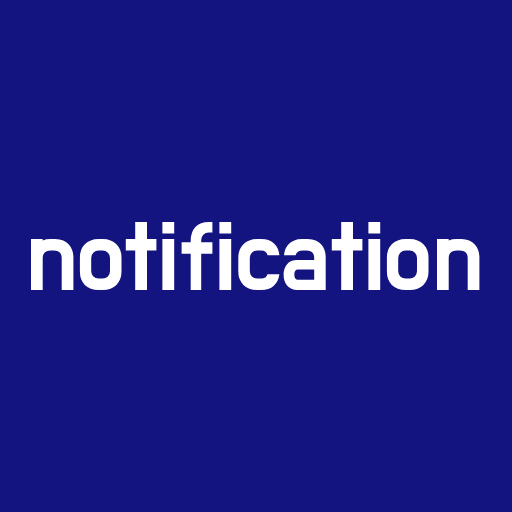
<style>
.page{position:relative;width:512px;height:512px;background:#131480}
.page>*{position:absolute;margin:0}
.t1{font:100px "DoHyeon-Regular";color:#ffffff}
</style>
<div class="page">
<p class="t1" style="left:31px;top:221px;width:449px;height:70px">notification</p>
</div>
